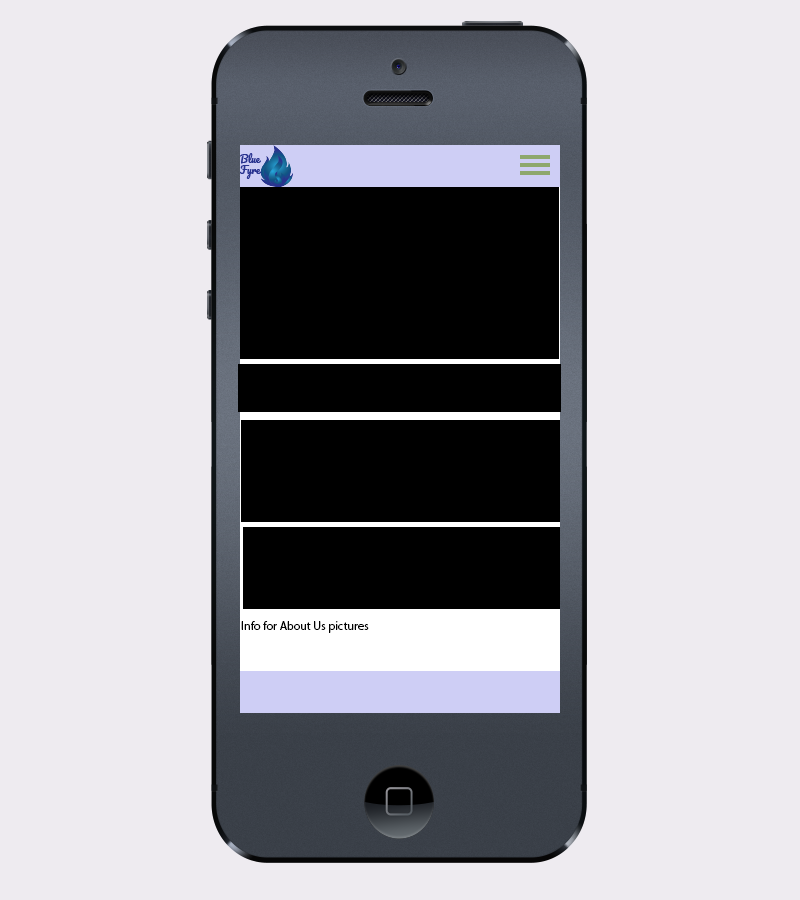
<style>
.page{position:relative;width:800px;height:900px;background:#eeebf0}
.page>*{position:absolute;margin:0}
.t1{font:12px "MyriadPro-Regular";color:#000000}
</style>
<div class="page">
<p class="t1" style="left:241px;top:621px;width:128px;height:12px">Info for About Us pictures</p>
</div>
